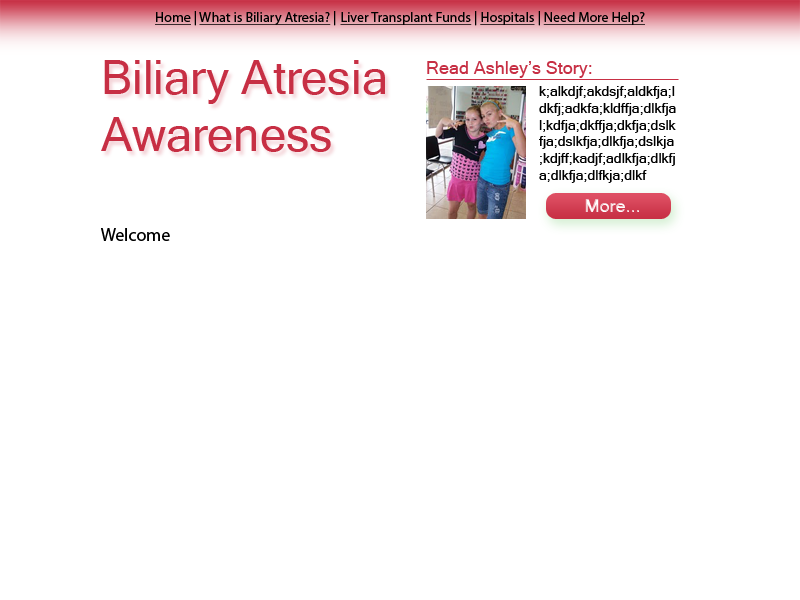
<style>
.page{position:relative;width:800px;height:600px;background:#ffffff}
.page>*{position:absolute;margin:0}
.t1{font:14.1px "MyriadPro-Regular";color:#000000;text-decoration:underline}
.t2{font:14.1px "MyriadPro-Regular";color:#000000}
.t3{font:46.9px "MicrosoftSansSerif";color:#c72f44}
.t4{font:18px "MicrosoftSansSerif";color:#c72f44}
.t5{font:14px "MicrosoftSansSerif";color:#000000}
.t6{font:18px "MicrosoftSansSerif"}
.t7{font:18px "MyriadPro-Regular";color:#000000}
</style>
<div class="page">
<p class="t1" style="left:155px;top:11px;width:490px;height:15px">Home<span class="t2"> | </span>What is Biliary Atresia?<span class="t2"> | </span>Liver Transplant Funds<span class="t2"> | </span>Hospitals<span class="t2"> | </span>Need More Help?</p>
<p class="t3" style="left:101px;top:60px;width:284px;height:92px">Biliary Atresia <br>Awareness</p>
<p class="t4" style="left:427px;top:61px;width:165px;height:17px">Read Ashley’s Story:</p>
<p class="t5" style="left:539px;top:86px;width:137px;height:97px">k;alkdjf;akdsjf;aldkfja;ldkfj;adkfa;kldffja;dlkfjal;kdfja;dkffja;dkfja;dslkfja;dslkfja;dlkfja;dslkja;kdjff;kadjf;adlkfja;dlkfja;dlkfja;dlfkja;dlkf</p>
<p class="t6" style="left:585px;top:199px;width:54px;height:13px">More...</p>
<p class="t7" style="left:101px;top:228px;width:69px;height:13px">Welcome</p>
</div>
